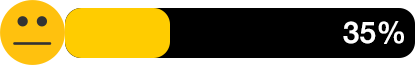
<style>
.page{position:relative;width:415px;height:65px;background:#000000}
.page>*{position:absolute;margin:0}
.t1{font:30px "HelveticaNeueCyr-Medium";color:#ffffff}
</style>
<div class="page">
<p class="t1" style="left:343px;top:21px;width:61px;height:23px">35%</p>
</div>
